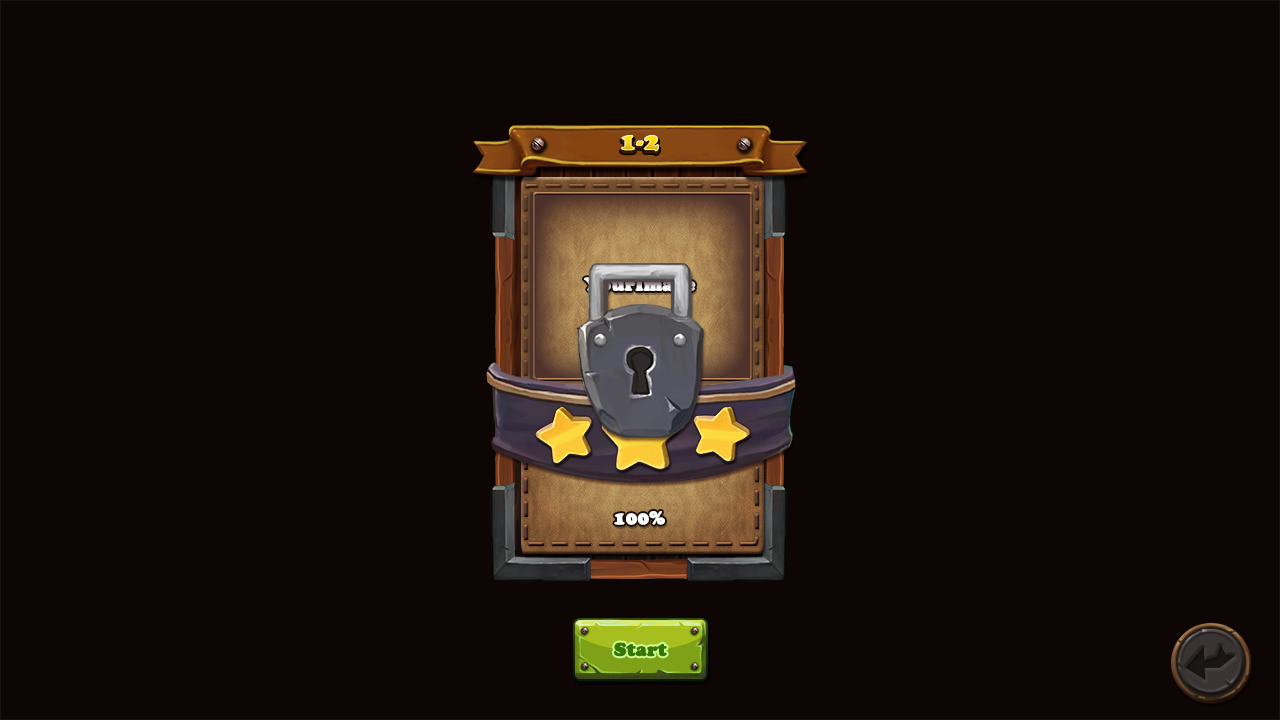
<style>
.page{position:relative;width:1280px;height:720px;background:#0e0604}
.page>*{position:absolute;margin:0}
.t1{font:24px "CooperBlackStd";font-weight:bold}
.t2{font:18px "CooperBlackStd";font-weight:bold}
.t3{font:18px "CooperBlackStd";color:#ffffff;font-weight:bold}
.t4{font:18px "CooperBlackStd";color:#367502;font-weight:bold}
</style>
<div class="page">
<p class="t1" style="left:621px;top:135px;width:38px;height:17px">1-2</p>
<p class="t2" style="left:584px;top:277px;width:112px;height:18px">YourImage</p>
<p class="t3" style="left:614px;top:511px;width:51px;height:14px">100%</p>
<p class="t4" style="left:614px;top:642px;width:53px;height:15px">Start</p>
</div>
